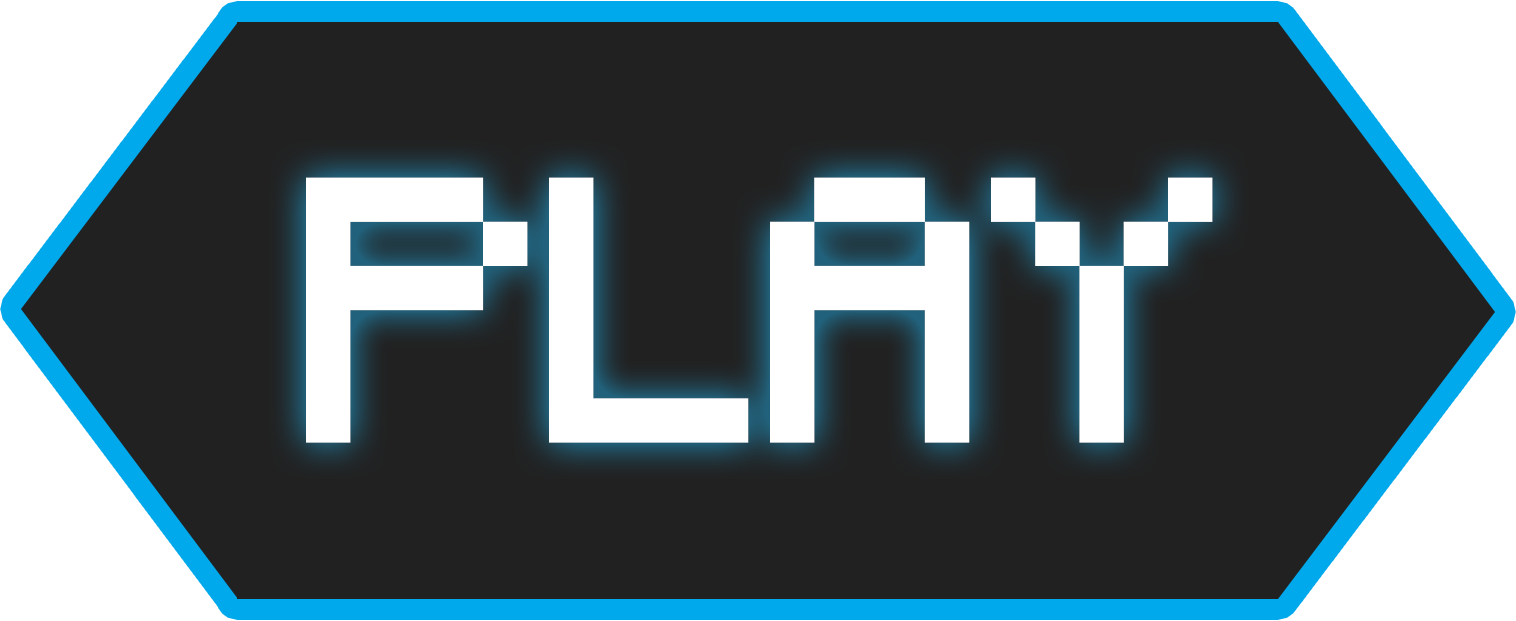
<style>
.page{position:relative;width:1516px;height:621px;background:#212121}
.page>*{position:absolute;margin:0}
.t1{font:353.3px "Minecraft";color:#ffffff}
</style>
<div class="page">
<p class="t1" style="left:306px;top:177px;width:907px;height:266px">PLAY</p>
</div>
